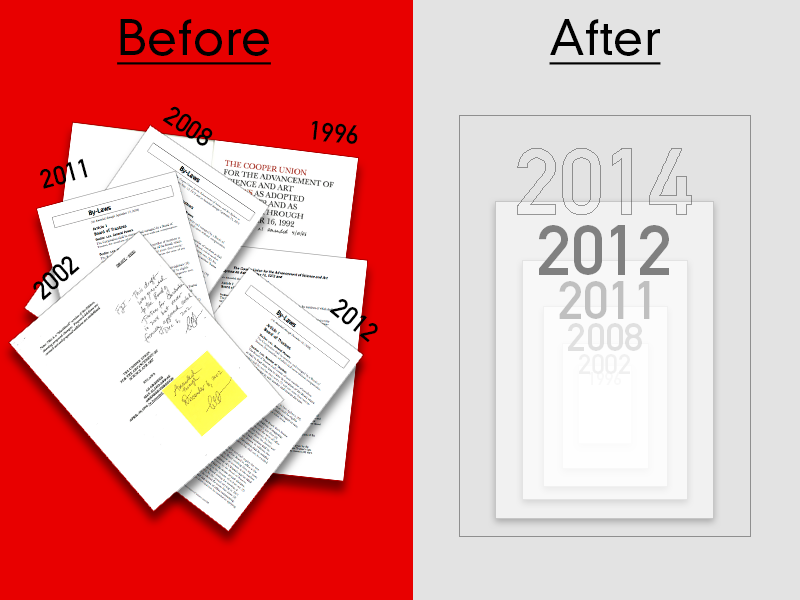
<style>
.page{position:relative;width:800px;height:600px;background:#e3e3e3}
.page>*{position:absolute;margin:0}
.t1{font:48px "DINNeuzeitGroteskStd-Light";color:#000000;text-decoration:underline}
.t2{font:26.4px "DINMittelschriftStd";color:#000000}
.t3{font:69.4px "DINMittelschriftStd";color:#808080}
.t4{font:52.4px "DINMittelschriftStd";color:#c0c0c0}
.t5{font:39.5px "DINMittelschriftStd";color:#e0e0e0}
.t6{font:27.4px "DINMittelschriftStd";color:#f0f0f0}
.t7{font:17.2px "DINMittelschriftStd";color:#f8f8f8}
</style>
<div class="page">
<p class="t1" style="left:117px;top:19px;width:154px;height:46px">Before</p>
<p class="t1" style="left:549px;top:19px;width:112px;height:46px">After</p>
<p class="t2" style="left:162px;top:106px;width:51px;height:40px;rotate:34deg">2008</p>
<p class="t2" style="left:312px;top:120px;width:46px;height:24px;rotate:6deg">1996</p>
<p class="t2" style="left:40px;top:158px;width:48px;height:31px;rotate:-15deg">2011</p>
<p class="t3" style="left:539px;top:225px;width:130px;height:50px">2012</p>
<p class="t2" style="left:33px;top:256px;width:47px;height:45px;rotate:-41deg">2002</p>
<p class="t4" style="left:559px;top:281px;width:91px;height:38px">2011</p>
<p class="t2" style="left:329px;top:299px;width:49px;height:44px;rotate:39deg">2012</p>
<p class="t5" style="left:568px;top:323px;width:74px;height:28px">2008</p>
<p class="t6" style="left:579px;top:354px;width:51px;height:20px">2002</p>
<p class="t7" style="left:589px;top:372px;width:32px;height:13px">1996</p>
</div>
